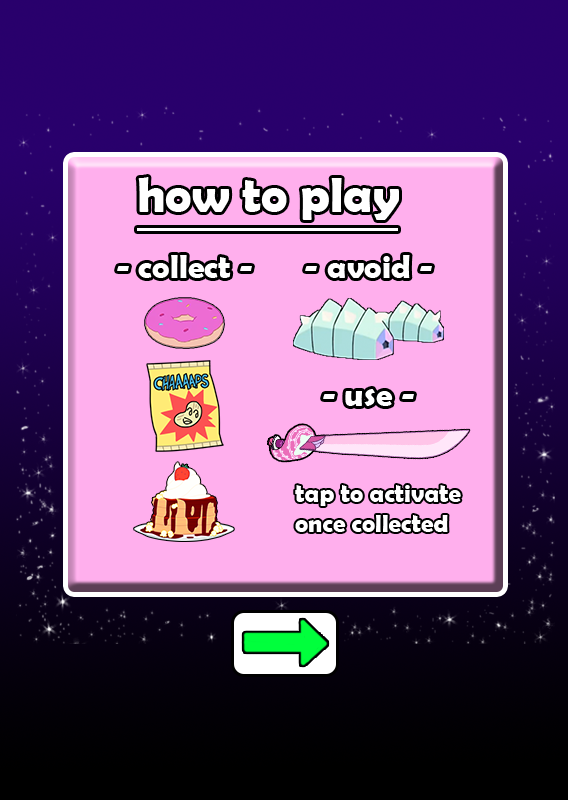
<style>
.page{position:relative;width:568px;height:800px;background:#ffafed}
.page>*{position:absolute;margin:0}
.t1{font:33.3px "BerlinSansFBDemi-Bold";color:#ffffff}
.t2{font:25px "BerlinSansFBDemi-Bold";color:#ffffff}
</style>
<div class="page">
<p class="t1" style="left:117px;top:255px;width:135px;height:23px">- collect -</p>
<p class="t1" style="left:305px;top:255px;width:127px;height:23px">- avoid -</p>
<p class="t1" style="left:323px;top:389px;width:91px;height:17px">- use -</p>
<p class="t2" style="left:295px;top:485px;width:166px;height:47px">tap to activate once collected</p>
</div>
